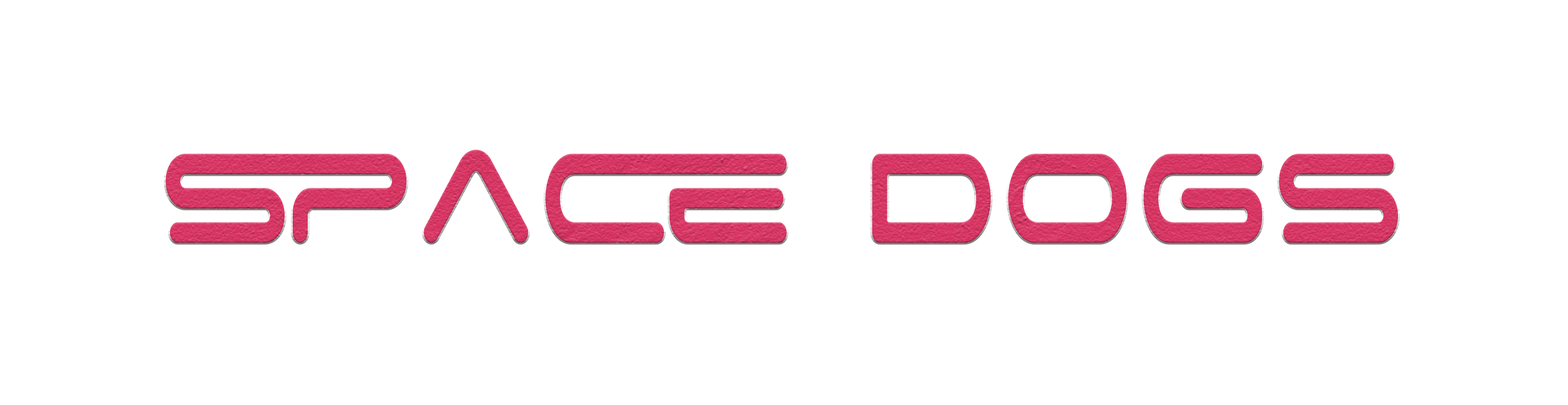
<style>
.page{position:relative;width:1568px;height:405px;background:#ffffff}
.page>*{position:absolute;margin:0}
.t1{font:201.7px "SpaceAge";color:#d93563;font-weight:bold;scale:0.71 1}
</style>
<div class="page">
<p class="t1" style="left:164px;top:148px;width:1236px;height:97px">Space Dogs</p>
</div>
